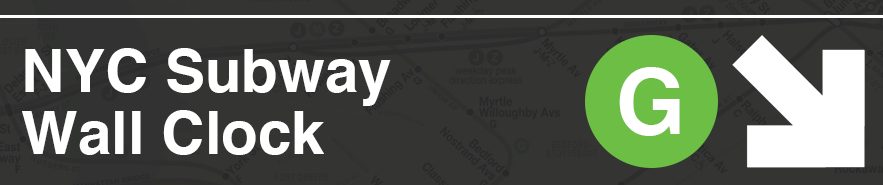
<style>
.page{position:relative;width:883px;height:185px;background:#343433}
.page>*{position:absolute;margin:0}
.t1{font:60px/62px "Helvetica-Bold";color:#ffffff}
.t2{font:89.5px "Helvetica-Bold";color:#ffffff}
</style>
<div class="page">
<p class="t1" style="left:22px;top:48px;width:369px;height:107px">NYC Subway<br>Wall Clock</p>
<p class="t2" style="left:619px;top:67px;width:61px;height:69px">G</p>
</div>
